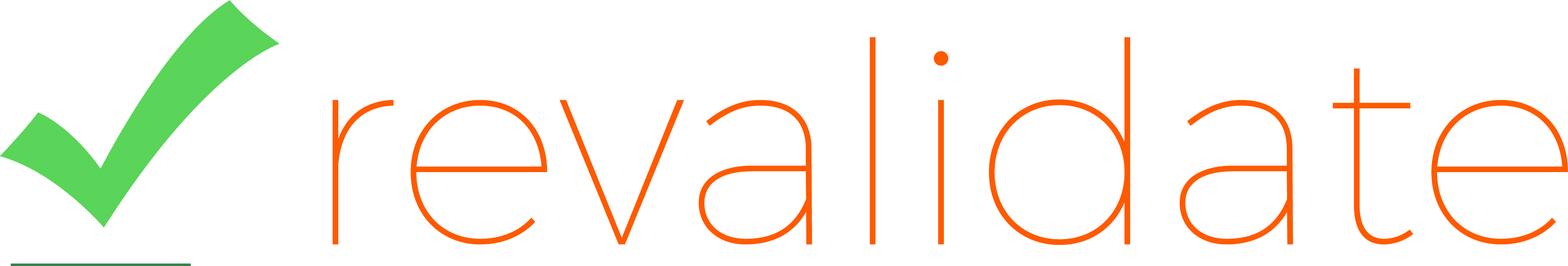
<style>
.page{position:relative;width:1568px;height:266px;background:#ffffff}
.page>*{position:absolute;margin:0}
.t1{font:278.8px "Montserrat-Hairline";color:#ff5a00}
</style>
<div class="page">
<p class="t1" style="left:333px;top:37px;width:1235px;height:208px">revalidate</p>
</div>
